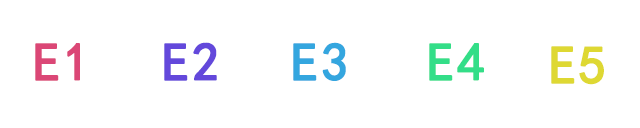
<style>
.page{position:relative;width:640px;height:128px;background:#ffffff}
.page>*{position:absolute;margin:0}
.t1{font:53.5px "SimHei";letter-spacing:0.04em;color:#db4776;font-weight:bold}
.t2{font:53.5px "SimHei";letter-spacing:0.04em;color:#6348db;font-weight:bold}
.t3{font:53.5px "SimHei";letter-spacing:0.04em;color:#34a6df;font-weight:bold}
.t4{font:53.5px "SimHei";letter-spacing:0.04em;color:#33de88;font-weight:bold}
.t5{font:53.5px "SimHei";letter-spacing:0.04em;color:#ded833;font-weight:bold}
</style>
<div class="page">
<p class="t1" style="left:35px;top:43px;width:45px;height:38px">E1</p>
<p class="t2" style="left:164px;top:42px;width:53px;height:39px">E2</p>
<p class="t3" style="left:293px;top:42px;width:53px;height:39px">E3</p>
<p class="t4" style="left:429px;top:43px;width:55px;height:38px">E4</p>
<p class="t5" style="left:551px;top:46px;width:53px;height:39px">E5</p>
</div>
